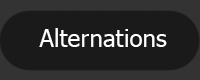
<style>
.page{position:relative;width:200px;height:80px;background:#1a1a1a}
.page>*{position:absolute;margin:0}
.t1{font:24px "Tahoma";color:#ffffff}
</style>
<div class="page">
<p class="t1" style="left:39px;top:28px;width:128px;height:19px">Alternations</p>
</div>
